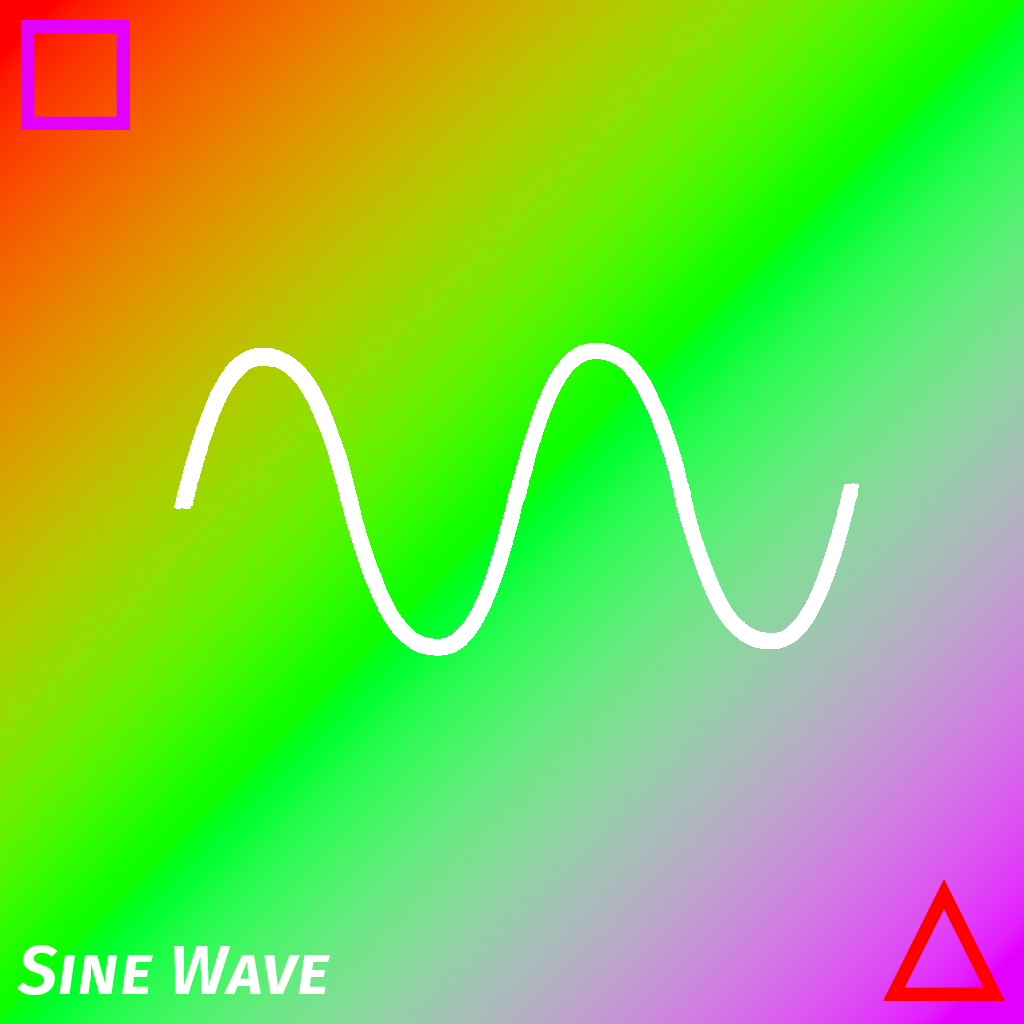
<style>
.page{position:relative;width:1024px;height:1024px}
.page>*{position:absolute;margin:0}
.t1{font:70px "FiraSans-SemiBoldItalic";color:#ffffff;font-variant:small-caps}
</style>
<div class="page">
<p class="t1" style="left:17px;top:945px;width:313px;height:50px">Sine Wave</p>
</div>
